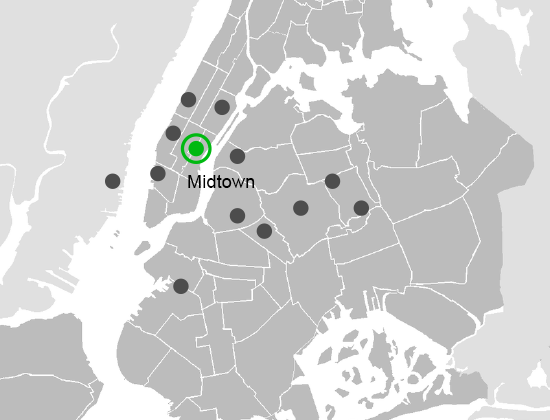
<style>
.page{position:relative;width:550px;height:420px;background:#bcbcbc}
.page>*{position:absolute;margin:0}
.t1{font:18.4px "ArialMT";color:#000000}
</style>
<div class="page">
<p class="t1" style="left:188px;top:175px;width:67px;height:13px">Midtown</p>
</div>
